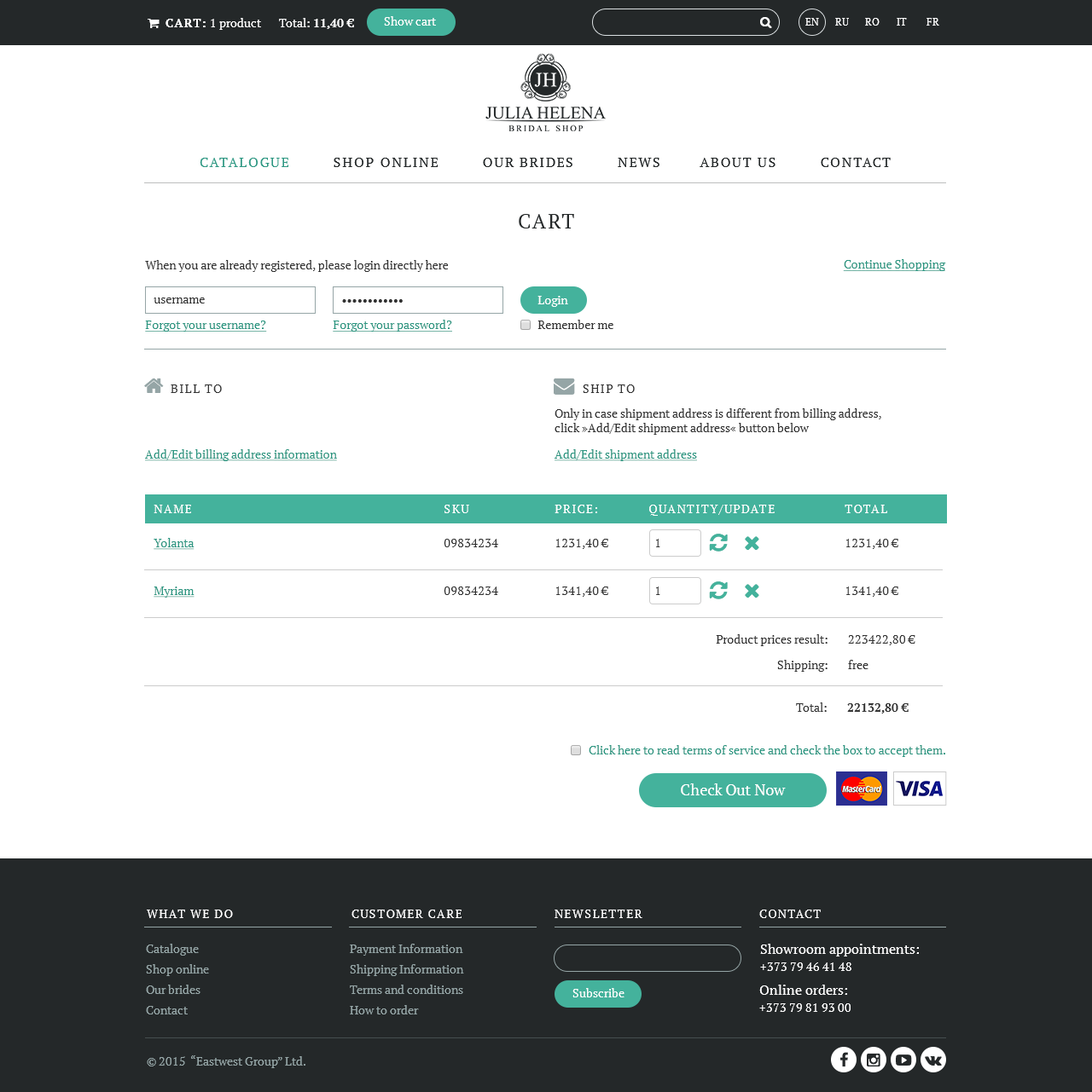
<style>
.page{position:relative;width:1092px;height:1092px;background:#ffffff}
.page>*{position:absolute;margin:0}
.t1{font:20.5px "PTSerif-Regular";letter-spacing:0.1em;color:#242829;text-transform:uppercase}
.t2{font:11.9px "PTSerif-Regular";color:#333333}
.t3{font:11.9px "PTSerif-Regular";color:#2d9782;text-decoration:underline}
.t4{font:11.9px "PTSerif-Regular";color:#ffffff}
.t5{font:11.9px "PTSerif-Regular";letter-spacing:0.1em;color:#333333;text-transform:uppercase}
.t6{font:11.9px "PTSerif-Regular";letter-spacing:0.1em;color:#ffffff;text-transform:uppercase}
.t7{font:11.9px "PTSerif-Bold";color:#333333}
.t8{font:11.9px "PTSerif-Regular";color:#2d9782}
.t9{font:15.4px "PTSerif-Regular";color:#ffffff}
</style>
<div class="page">
<p class="t1" style="left:518px;top:214px;width:56px;height:15px">Cart</p>
<p class="t2" style="left:145px;top:260px;width:303px;height:12px">When you are already registered, please login directly here</p>
<p class="t3" style="left:843px;top:259px;width:103px;height:12px">Continue Shopping</p>
<p class="t2" style="left:154px;top:298px;width:51px;height:6px">username</p>
<p class="t2" style="left:342px;top:299px;width:61px;height:4px">••••••••••••</p>
<p class="t4" style="left:537px;top:296px;width:31px;height:11px">Login</p>
<p class="t3" style="left:145px;top:321px;width:122px;height:11px">Forgot your username?</p>
<p class="t3" style="left:333px;top:320px;width:119px;height:12px">Forgot your password?</p>
<p class="t2" style="left:537px;top:320px;width:76px;height:9px">Remember me</p>
<p class="t5" style="left:171px;top:385px;width:51px;height:8px">Bill to</p>
<p class="t5" style="left:582px;top:385px;width:52px;height:8px">Ship to</p>
<p class="t2" style="left:554px;top:408px;width:327px;height:27px">Only in case shipment address is different from billing address, click »Add/Edit shipment address« button below</p>
<p class="t3" style="left:145px;top:449px;width:192px;height:12px">Add/Edit billing address information</p>
<p class="t3" style="left:554px;top:449px;width:143px;height:12px">Add/Edit shipment address</p>
<p class="t6" style="left:154px;top:505px;width:37px;height:8px">Name</p>
<p class="t6" style="left:444px;top:505px;width:25px;height:8px">SKU</p>
<p class="t6" style="left:554px;top:505px;width:43px;height:8px">Price:</p>
<p class="t6" style="left:649px;top:505px;width:125px;height:11px">Quantity/Update</p>
<p class="t6" style="left:844px;top:505px;width:43px;height:8px">Total</p>
<p class="t3" style="left:154px;top:538px;width:40px;height:12px">Yolanta</p>
<p class="t2" style="left:443px;top:539px;width:55px;height:8px">09834234</p>
<p class="t2" style="left:556px;top:539px;width:52px;height:10px">1231,40 €</p>
<p class="t2" style="left:656px;top:539px;width:4px;height:8px">1</p>
<p class="t2" style="left:846px;top:539px;width:52px;height:10px">1231,40 €</p>
<p class="t3" style="left:154px;top:587px;width:40px;height:11px">Myriam</p>
<p class="t2" style="left:443px;top:587px;width:55px;height:8px">09834234</p>
<p class="t2" style="left:556px;top:587px;width:52px;height:10px">1341,40 €</p>
<p class="t2" style="left:656px;top:587px;width:4px;height:8px">1</p>
<p class="t2" style="left:846px;top:587px;width:52px;height:10px">1341,40 €</p>
<p class="t2" style="left:715px;top:634px;width:112px;height:12px">Product prices result:</p>
<p class="t2" style="left:848px;top:635px;width:67px;height:11px">223422,80 €</p>
<p class="t2" style="left:777px;top:660px;width:50px;height:12px">Shipping:</p>
<p class="t2" style="left:848px;top:660px;width:20px;height:9px">free</p>
<p class="t2" style="left:796px;top:703px;width:30px;height:9px">Total:</p>
<p class="t7" style="left:847px;top:704px;width:61px;height:10px">22132,80 €</p>
<p class="t8" style="left:588px;top:745px;width:357px;height:12px">Click here to read terms of service and check the box to accept them.</p>
<p class="t9" style="left:681px;top:784px;width:104px;height:12px">Check Out Now</p>
</div>
